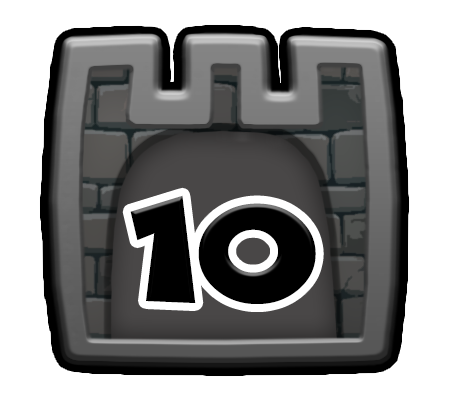
<style>
.page{position:relative;width:450px;height:400px;background:#ffffff}
.page>*{position:absolute;margin:0}
.t1{font:146.8px "Funhouse";color:#000000}
</style>
<div class="page">
<p class="t1" style="left:130px;top:195px;width:186px;height:109px">10</p>
</div>
